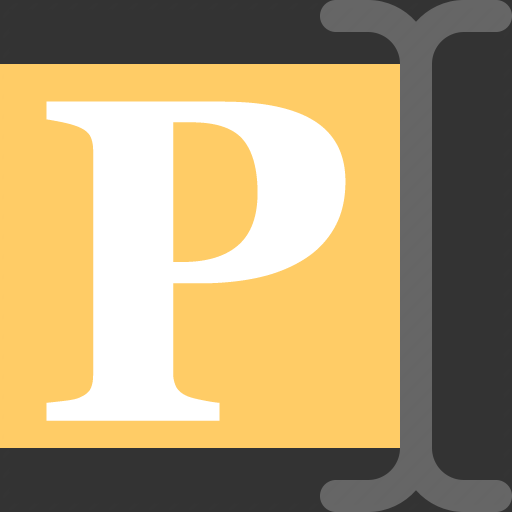
<style>
.page{position:relative;width:512px;height:512px;background:#ffcc66}
.page>*{position:absolute;margin:0}
.t1{font:460.1px "Georgia-Bold";color:#ffffff}
</style>
<div class="page">
<p class="t1" style="left:46px;top:101px;width:300px;height:320px">P</p>
</div>
